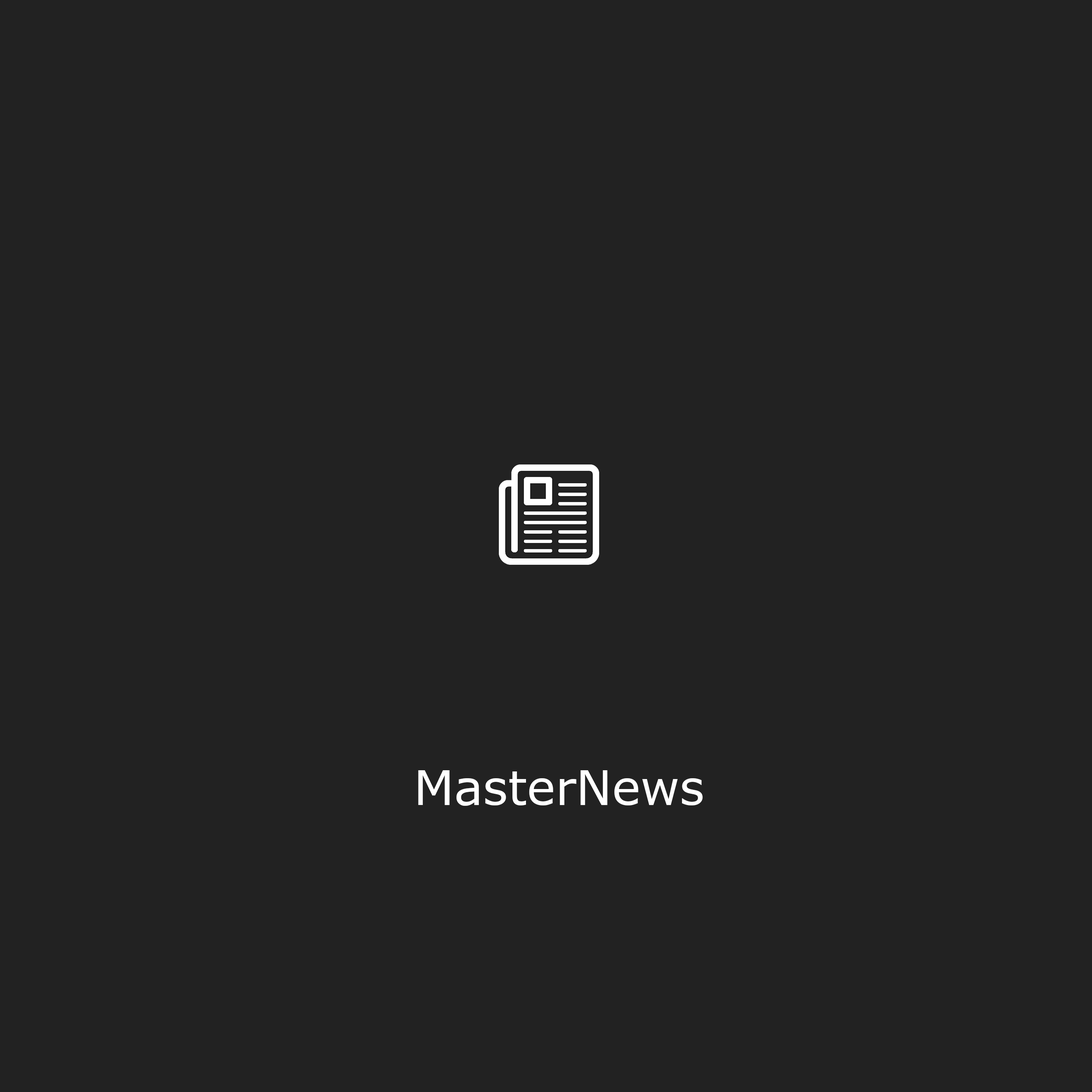
<style>
.page{position:relative;width:1092px;height:1092px;background:#222222}
.page>*{position:absolute;margin:0}
.t1{font:48px "Verdana";color:#ffffff}
</style>
<div class="page">
<p class="t1" style="left:418px;top:770px;width:285px;height:36px">MasterNews</p>
</div>
